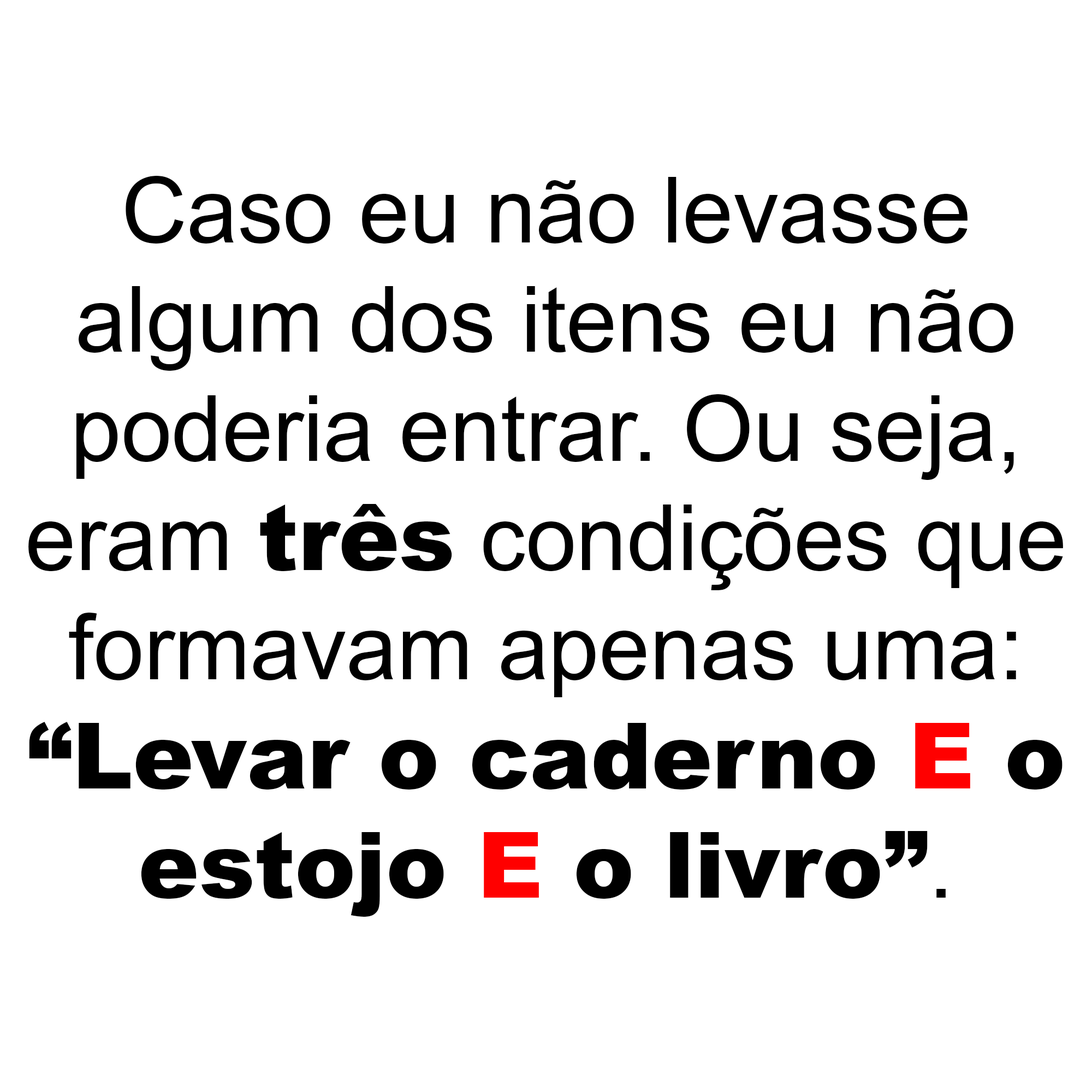
<style>
.page{position:relative;width:1092px;height:1092px;background:#ffffff}
.page>*{position:absolute;margin:0}
.t1{font:91px "ArialMT";color:#000000}
.t2{font:91px "Arial-Black";color:#000000}
.t3{font:91px "Arial-Black";color:#ff0000}
</style>
<div class="page">
<p class="t1" style="left:28px;top:176px;width:1035px;height:741px;text-align:center">Caso eu não levasse<br>algum dos itens eu não<br>poderia entrar. Ou seja,<br>eram <span class="t2">três</span> condições que<br>formavam apenas uma:<br><span class="t2">“Levar o caderno </span><span class="t3">E</span><span class="t2"> o<br>estojo </span><span class="t3">E</span><span class="t2"> o livro”</span>.</p>
</div>
